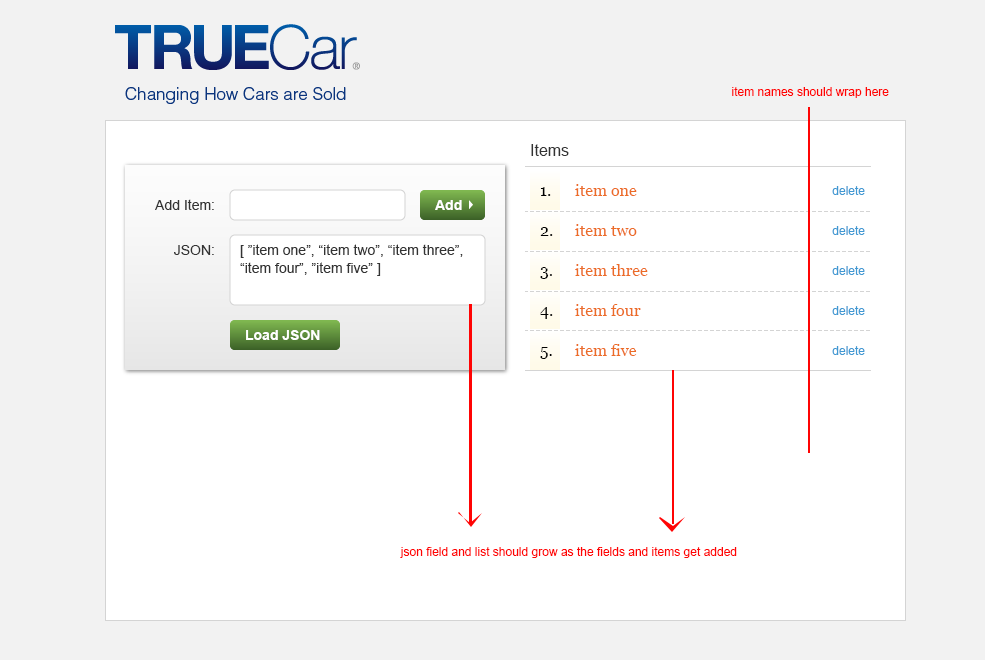
<style>
.page{position:relative;width:985px;height:660px;background:#ffffff}
.page>*{position:absolute;margin:0}
.t1{font:12px "ArialMT";color:#ff0404}
.t2{font:16px "ArialMT";color:#333333}
.t3{font:16px "Georgia";color:#ec6c27}
.t4{font:16px "Georgia";color:#000000}
.t5{font:12px "ArialMT";color:#4199d3}
.t6{font:14px "ArialMT";color:#333333}
.t7{font:14px "Arial-BoldMT";color:#ffffff}
.t8{font:14px/18px "ArialMT";color:#333333}
</style>
<div class="page">
<p class="t1" style="left:732px;top:87px;width:157px;height:11px">item names should wrap here</p>
<p class="t2" style="left:531px;top:144px;width:38px;height:12px">Items</p>
<p class="t3" style="left:575px;top:184px;width:62px;height:12px">item one</p>
<p class="t4" style="left:540px;top:187px;width:11px;height:9px">1.</p>
<p class="t5" style="left:832px;top:186px;width:33px;height:9px">delete</p>
<p class="t6" style="left:155px;top:199px;width:59px;height:11px">Add Item:</p>
<p class="t7" style="left:435px;top:200px;width:27px;height:10px">Add</p>
<p class="t4" style="left:540px;top:227px;width:13px;height:9px">2.</p>
<p class="t3" style="left:575px;top:224px;width:62px;height:12px">item two</p>
<p class="t5" style="left:832px;top:226px;width:33px;height:9px">delete</p>
<p class="t6" style="left:174px;top:245px;width:40px;height:10px">JSON:</p>
<p class="t8" style="left:240px;top:244px;width:223px;height:32px">[ ”item one”, “item two”, “item three”, “item four”, ”item five” ]</p>
<p class="t4" style="left:540px;top:267px;width:12px;height:12px">3.</p>
<p class="t3" style="left:575px;top:264px;width:73px;height:12px">item three</p>
<p class="t5" style="left:832px;top:266px;width:33px;height:9px">delete</p>
<p class="t3" style="left:575px;top:304px;width:66px;height:12px">item four</p>
<p class="t4" style="left:540px;top:307px;width:13px;height:12px">4.</p>
<p class="t5" style="left:832px;top:306px;width:33px;height:9px">delete</p>
<p class="t7" style="left:246px;top:330px;width:74px;height:10px">Load JSON</p>
<p class="t4" style="left:540px;top:347px;width:12px;height:12px">5.</p>
<p class="t3" style="left:575px;top:344px;width:62px;height:12px">item five</p>
<p class="t5" style="left:832px;top:346px;width:33px;height:9px">delete</p>
<p class="t1" style="left:400px;top:547px;width:337px;height:11px">json field and list should grow as the fields and items get added</p>
</div>
